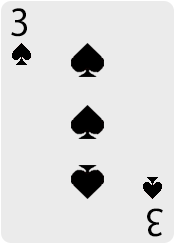
<style>
.page{position:relative;width:175px;height:244px;background:#ebebeb}
.page>*{position:absolute;margin:0}
.t1{font:36px "KozGoPr6N-Regular";color:#000000}
</style>
<div class="page">
<p class="t1" style="left:11px;top:8px;width:16px;height:29px">3</p>
<p class="t1" style="left:147px;top:208px;width:16px;height:29px;rotate:-180deg">3</p>
</div>
